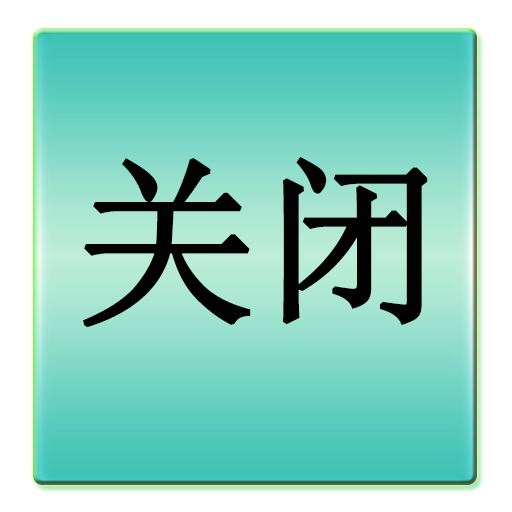
<style>
.page{position:relative;width:512px;height:512px}
.page>*{position:absolute;margin:0}
.t1{font:180px "SimSun";color:#020202;font-weight:bold}
</style>
<div class="page">
<p class="t1" style="left:83px;top:157px;width:345px;height:171px">关闭</p>
</div>
